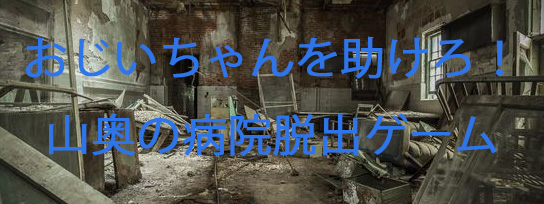
<style>
.page{position:relative;width:544px;height:204px}
.page>*{position:absolute;margin:0}
.t1{font:44px "KozGoPr6N-Regular";letter-spacing:0.005em;color:#2f75ea;font-weight:bold}
</style>
<div class="page">
<p class="t1" style="left:26px;top:36px;width:477px;height:120px;text-align:center">おじいちゃんを助けろ！<br>山奥の病院脱出ゲーム</p>
</div>
